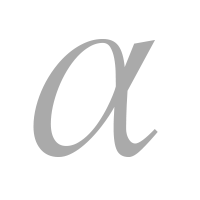
<style>
.page{position:relative;width:200px;height:200px;background:#ffffff}
.page>*{position:absolute;margin:0}
.t1{font:416.7px "SavoyeLetPlain";color:#aaaaaa}
</style>
<div class="page">
<p class="t1" style="left:33px;top:39px;width:125px;height:118px">α</p>
</div>
